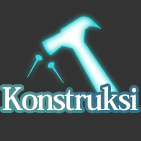
<style>
.page{position:relative;width:141px;height:141px;background:#333333}
.page>*{position:absolute;margin:0}
.t1{font:32px "HeiseiMinStd-W7";letter-spacing:-0.04em;color:#fffef9;scale:0.96 1}
</style>
<div class="page">
<p class="t1" style="left:2px;top:86px;width:136px;height:25px">Konstruksi</p>
</div>
